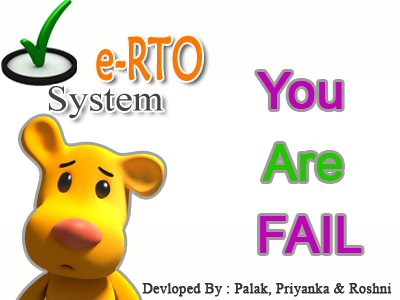
<style>
.page{position:relative;width:400px;height:300px;background:#fefefc}
.page>*{position:absolute;margin:0}
.t1{font:59.1px "MaiandraGD-Regular";color:#fa7800;font-weight:bold;scale:0.63 1}
.t2{font:50.3px/72px "ArialMT";color:#bb05b4;font-weight:bold}
.t3{font:50.3px/72px "ArialMT";color:#25c206;font-weight:bold}
.t4{font:36.3px "TimesNewRomanPSMT";color:#434242;scale:1.1 1}
.t5{font:14.2px "TimesNewRomanPSMT";color:#313133;font-weight:bold}
</style>
<div class="page">
<p class="t1" style="left:96px;top:35px;width:106px;height:46px">e-RTO</p>
<p class="t2" style="left:257px;top:72px;width:105px;height:181px;text-align:center">You <br><span class="t3">Are <br></span>FAIL</p>
<p class="t4" style="left:48px;top:86px;width:116px;height:33px">System</p>
<p class="t5" style="left:142px;top:283px;width:250px;height:14px">Devloped By : Palak, Priyanka &amp; Roshni</p>
</div>
